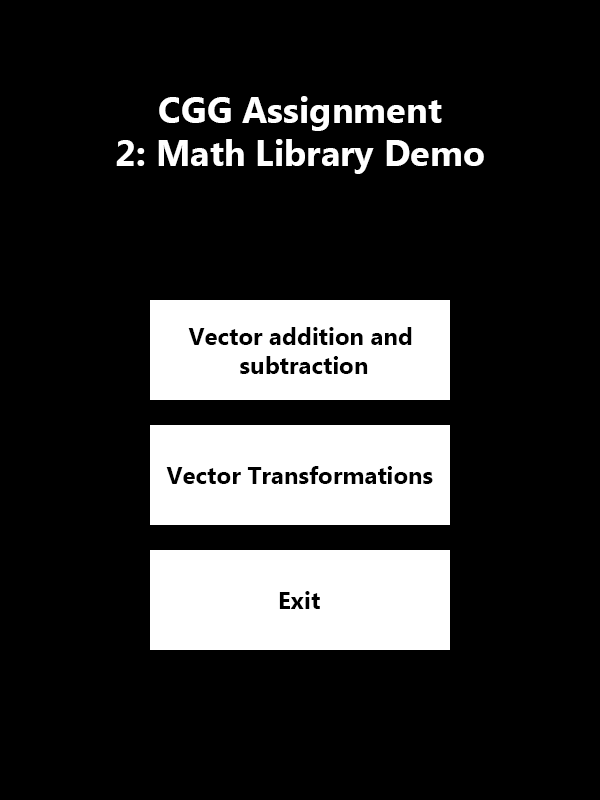
<style>
.page{position:relative;width:600px;height:800px;background:#000000}
.page>*{position:absolute;margin:0}
.t1{font:36px "MicrosoftNewTaiLue-Bold";color:#ffffff}
.t2{font:24px "MicrosoftNewTaiLue-Bold";color:#000000}
</style>
<div class="page">
<p class="t1" style="left:116px;top:96px;width:368px;height:78px;text-align:center">CGG Assignment<br>2: Math Library Demo</p>
<p class="t2" style="left:188px;top:327px;width:224px;height:47px;text-align:center">Vector addition and <br>subtraction</p>
<p class="t2" style="left:166px;top:466px;width:267px;height:18px">Vector Transformations</p>
<p class="t2" style="left:279px;top:591px;width:41px;height:18px">Exit</p>
</div>
